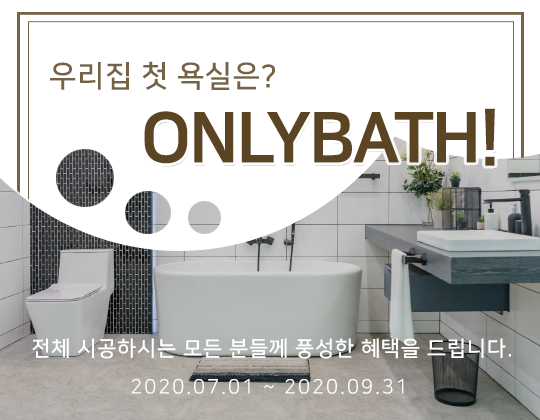
<style>
.page{position:relative;width:540px;height:420px;background:#ffffff}
.page>*{position:absolute;margin:0}
.t1{font:30px "NanumSquareB";letter-spacing:0.02em;color:#766245}
.t2{font:70px "NanumSquareEB";letter-spacing:-0.04em;color:#5b4422}
.t3{font:21px "NanumSquareB";letter-spacing:0.04em;color:#ffffff}
.t4{font:20px "NanumSquareR";letter-spacing:0.1em;color:#ffffff}
</style>
<div class="page">
<p class="t1" style="left:50px;top:61px;width:225px;height:29px">우리집 첫 욕실은?</p>
<p class="t2" style="left:144px;top:108px;width:351px;height:58px">ONLYBATH!</p>
<p class="t3" style="left:32px;top:338px;width:479px;height:21px">전체 시공하시는 모든 분들께 풍성한 혜택을 드립니다.</p>
<p class="t4" style="left:131px;top:379px;width:273px;height:15px">2020.07.01 ~ 2020.09.31</p>
</div>
